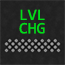
<style>
.page{position:relative;width:65px;height:65px}
.page>*{position:absolute;margin:0}
.t1{font:16px/13.3px "Consolas";color:#00dd18}
</style>
<div class="page">
<p class="t1" style="left:19px;top:9px;width:26px;height:25px">LVL<br>CHG</p>
</div>
